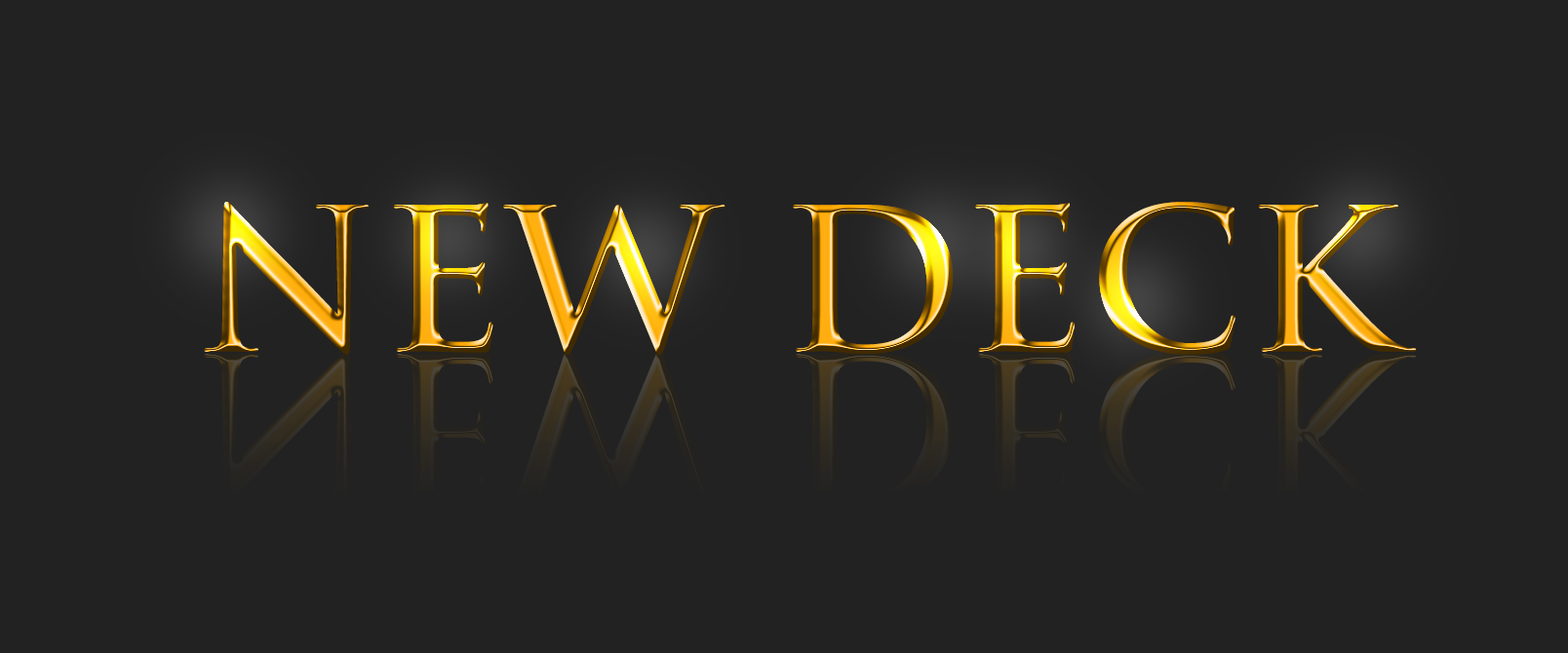
<style>
.page{position:relative;width:1568px;height:653px;background:#222222}
.page>*{position:absolute;margin:0}
.t1{font:195px "TrajanPro-Bold";letter-spacing:0.01em}
</style>
<div class="page">
<p class="t1" style="left:204px;top:202px;width:1213px;height:153px">NEW DECK</p>
</div>
